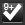
<style>
.page{position:relative;width:25px;height:25px;background:#333333}
.page>*{position:absolute;margin:0}
.t1{font:8.9px "ArialMT";color:#ffffff}
</style>
<div class="page">
<p class="t1" style="left:4px;top:3px;width:10px;height:7px">9+</p>
</div>
